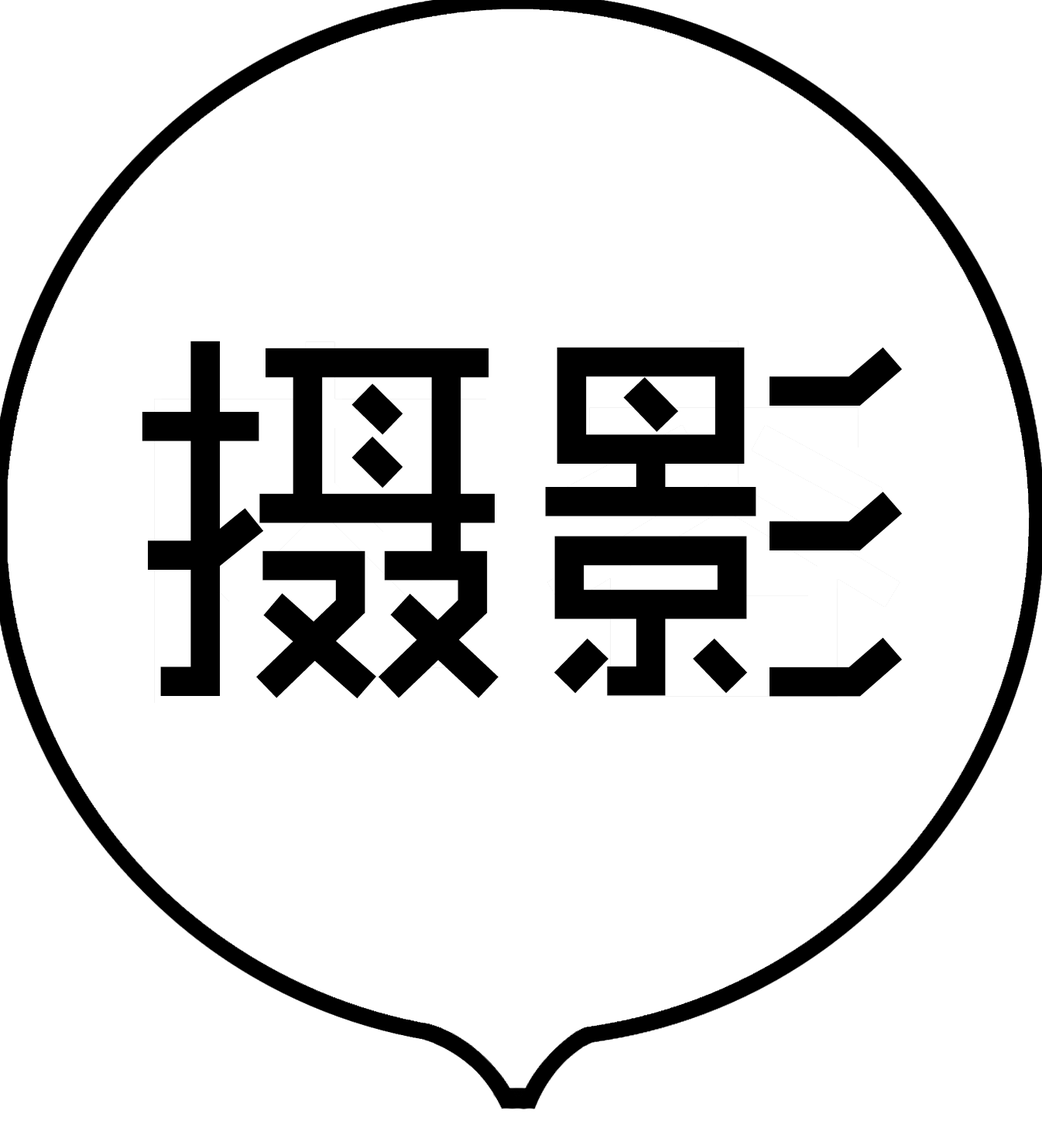
<style>
.page{position:relative;width:1042px;height:1145px;background:#ffffff}
.page>*{position:absolute;margin:0}
.t1{font:403.1px "RTWSShangGoG0v1-Regular";color:#000000}
</style>
<div class="page">
<p class="t1" style="left:142px;top:341px;width:760px;height:357px">摄影</p>
</div>
